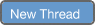
<style>
.page{position:relative;width:95px;height:25px;background:#6699cc}
.page>*{position:absolute;margin:0}
.t1{font:13px "HelveticaNeue";color:#ffffff}
</style>
<div class="page">
<p class="t1" style="left:11px;top:9px;width:69px;height:10px">New Thread</p>
</div>
